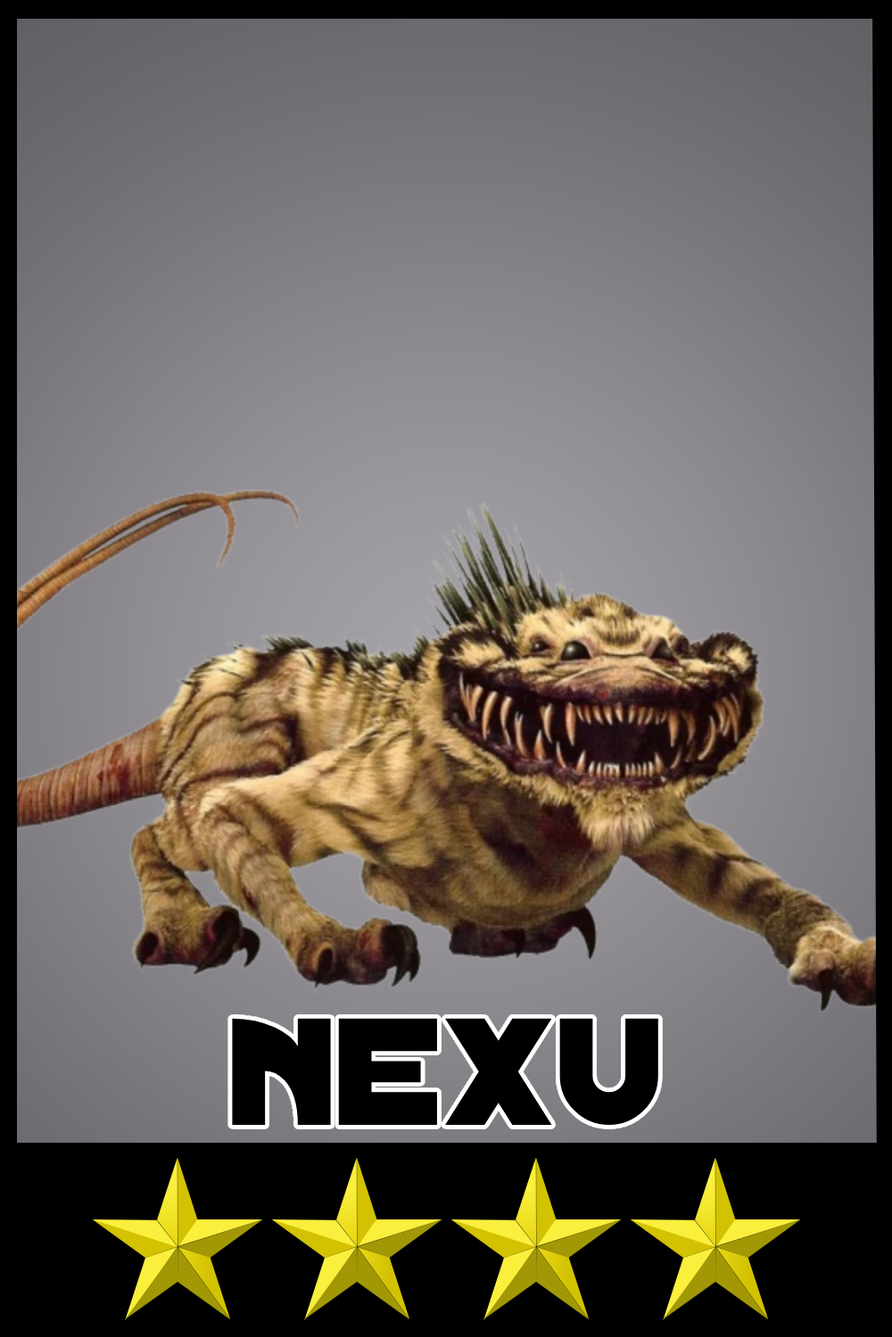
<style>
.page{position:relative;width:892px;height:1337px}
.page>*{position:absolute;margin:0}
.t1{font:163.7px "DistantGalaxy";color:#000000}
</style>
<div class="page">
<p class="t1" style="left:232px;top:1018px;width:426px;height:107px">nexu</p>
</div>
